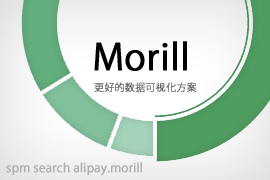
<style>
.page{position:relative;width:270px;height:180px}
.page>*{position:absolute;margin:0}
.t1{font:36px "KozGoPr6N-Regular";color:#000000;font-weight:bold}
.t2{font:10px "KozGoPr6N-Regular";color:#626262;font-weight:bold}
.t3{font:10px "AdobeHeitiStd-Regular";color:#626262;font-weight:bold}
.t4{font:12px "KozGoPr6N-Regular";color:#adadad;font-weight:bold}
</style>
<div class="page">
<p class="t1" style="left:94px;top:41px;width:93px;height:30px">Morill</p>
<p class="t2" style="left:94px;top:82px;width:103px;height:11px">更好的数据可<span class="t3">视</span>化方案</p>
<p class="t4" style="left:6px;top:162px;width:136px;height:14px">spm search alipay.morill</p>
</div>
